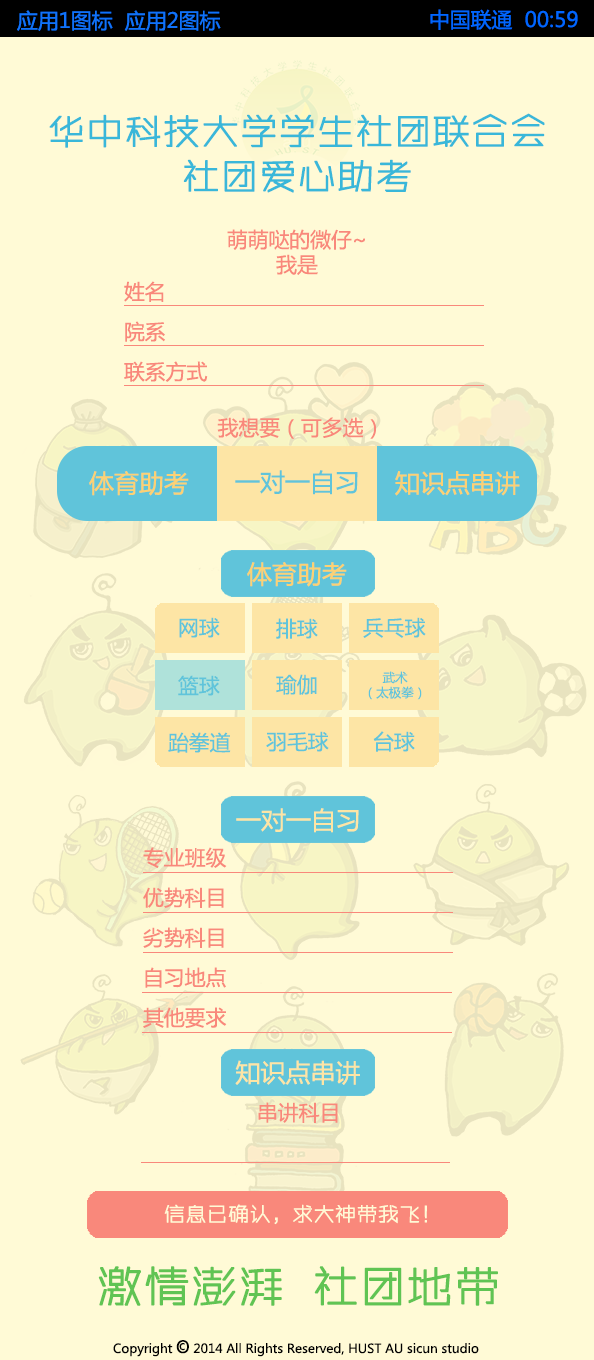
<style>
.page{position:relative;width:594px;height:1360px;background:#fffad6}
.page>*{position:absolute;margin:0}
.t1{font:20.8px "MicrosoftYaHei";color:#1072fa}
.t2{font:20.8px "MicrosoftYaHei";color:#0066ff}
.t3{font:37.5px "ZHSRXT--GBK1-0";color:#39b7d9;font-weight:bold}
.t4{font:20.8px "MicrosoftYaHei";color:#f9887b}
.t5{font:25px "MicrosoftYaHei";color:#fcd174}
.t6{font:25px "MicrosoftYaHei";color:#60c4da}
.t7{font:20.8px "MicrosoftYaHei";color:#60c4da}
.t8{font:12.5px "MicrosoftYaHei";color:#60c4da}
.t9{font:25px "MicrosoftYaHei";color:#fde5a5}
.t10{font:20.8px "ZHSRXT--GBK1-0";color:#fffad6;font-weight:bold}
.t11{font:45.8px "ZHSRXT--GBK1-0";color:#60c453;font-weight:bold}
.t12{font:12.5px "MicrosoftYaHei";color:#000000}
.t13{font:16.7px "MicrosoftYaHei";color:#000000}
</style>
<div class="page">
<p class="t1" style="left:17px;top:10px;width:204px;height:21px">应用1图标  应用2图标</p>
<p class="t2" style="left:430px;top:9px;width:148px;height:21px">中国联通  00:59</p>
<p class="t3" style="left:49px;top:113px;width:496px;height:80px;text-align:center">华中科技大学学生社团联合会<br>社团爱心助考</p>
<p class="t4" style="left:227px;top:229px;width:138px;height:46px;text-align:center">萌萌哒的微仔~<br>我是</p>
<p class="t4" style="left:124px;top:281px;width:84px;height:101px">姓名<br> <br>院系<br> <br>联系方式</p>
<p class="t4" style="left:217px;top:417px;width:159px;height:22px">我想要（可多选）</p>
<p class="t5" style="left:89px;top:471px;width:100px;height:25px">体育助考</p>
<p class="t6" style="left:235px;top:470px;width:123px;height:25px">一对一自习</p>
<p class="t5" style="left:395px;top:471px;width:125px;height:25px">知识点串讲</p>
<p class="t5" style="left:247px;top:562px;width:100px;height:25px">体育助考</p>
<p class="t7" style="left:179px;top:617px;width:41px;height:21px">网球</p>
<p class="t7" style="left:363px;top:617px;width:63px;height:21px">兵乓球</p>
<p class="t7" style="left:276px;top:618px;width:42px;height:21px">排球</p>
<p class="t7" style="left:178px;top:675px;width:42px;height:21px">篮球</p>
<p class="t7" style="left:276px;top:674px;width:41px;height:21px">瑜伽</p>
<p class="t8" style="left:368px;top:671px;width:54px;height:29px;text-align:center">武术<br>（太极拳）</p>
<p class="t7" style="left:168px;top:732px;width:63px;height:21px">跆拳道</p>
<p class="t7" style="left:266px;top:731px;width:63px;height:21px">羽毛球</p>
<p class="t7" style="left:373px;top:731px;width:42px;height:21px">台球</p>
<p class="t9" style="left:236px;top:808px;width:123px;height:25px">一对一自习</p>
<p class="t4" style="left:143px;top:847px;width:84px;height:181px">专业班级<br> <br>优势科目<br> <br>劣势科目<br> <br>自习地点<br> <br>其他要求</p>
<p class="t9" style="left:235px;top:1060px;width:125px;height:25px">知识点串讲</p>
<p class="t4" style="left:258px;top:1102px;width:80px;height:21px">串讲科目</p>
<p class="t10" style="left:164px;top:1204px;width:263px;height:21px">信息已确认，求大神带我飞！</p>
<p class="t11" style="left:98px;top:1266px;width:400px;height:40px">激情澎湃  社团地带</p>
<p class="t12" style="left:113px;top:1340px;width:366px;height:17px">Copyright <span class="t13">O</span> 2014 All Rights Reserved, HUST AU sicun studio</p>
<p class="t12" style="left:179px;top:1343px;width:6px;height:8px">c</p>
</div>
